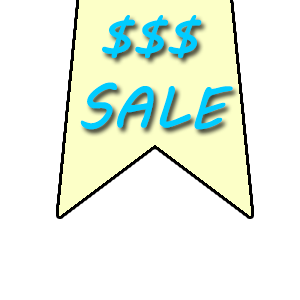
<style>
.page{position:relative;width:300px;height:300px;background:#ffffff}
.page>*{position:absolute;margin:0}
.t1{font:58.5px "MVBoli";letter-spacing:-0.02em;color:#00ccff;text-transform:uppercase;font-weight:bold}
</style>
<div class="page">
<p class="t1" style="left:80px;top:15px;width:153px;height:115px;text-align:center">$$$<br>Sale</p>
</div>
